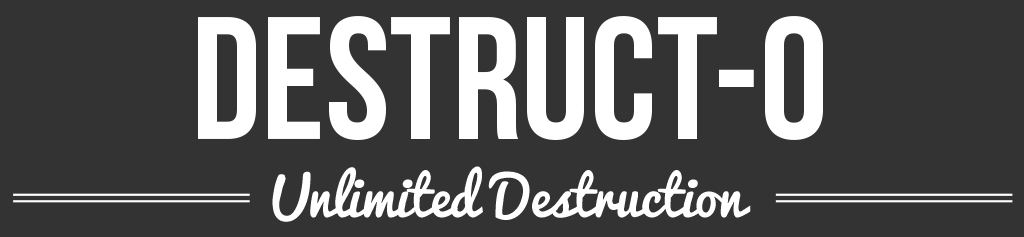
<style>
.page{position:relative;width:1024px;height:237px;background:#333333}
.page>*{position:absolute;margin:0}
.t1{font:173.6px "BebasNeue";color:#ffffff}
.t2{font:54.2px "Pacifico";color:#ffffff}
</style>
<div class="page">
<p class="t1" style="left:198px;top:16px;width:625px;height:124px">Destruct-o</p>
<p class="t2" style="left:272px;top:166px;width:479px;height:56px">Unlimited Destruction</p>
</div>
